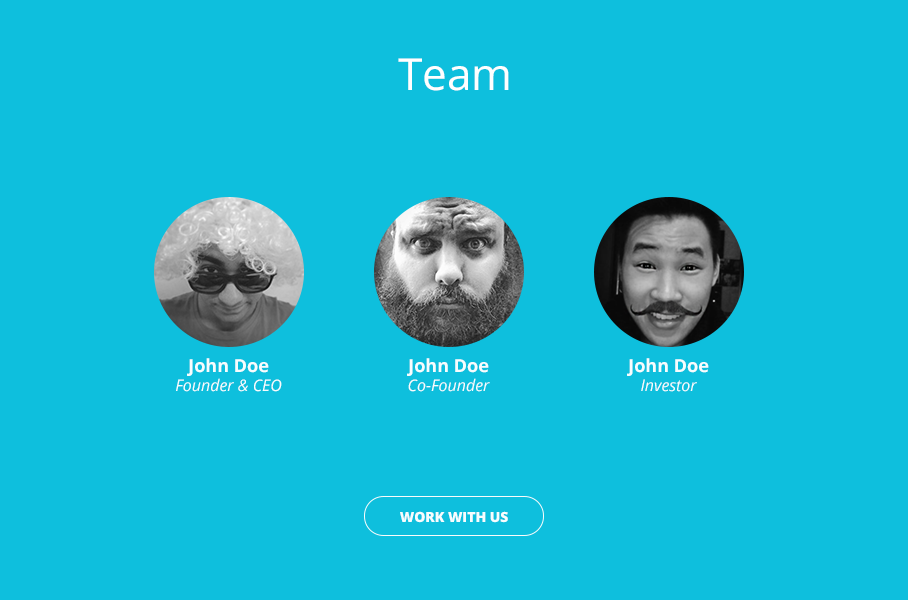
<style>
.page{position:relative;width:908px;height:600px;background:#0ebfdd}
.page>*{position:absolute;margin:0}
.t1{font:44px "OpenSans";color:#ffffff}
.t2{font:16px "OpenSans-Italic";color:#f7fdfe}
.t3{font:18px "OpenSans-Bold";color:#f7fdfe}
.t4{font:14px "OpenSans-Extrabold";color:#f7fdfe;text-transform:uppercase}
</style>
<div class="page">
<p class="t1" style="left:398px;top:58px;width:111px;height:33px">Team</p>
<p class="t2" style="left:176px;top:358px;width:106px;height:34px;text-align:center"><span class="t3">John Doe<br></span>Founder &amp; CEO</p>
<p class="t2" style="left:407px;top:358px;width:83px;height:34px;text-align:center"><span class="t3">John Doe<br></span>Co-Founder</p>
<p class="t3" style="left:627px;top:358px;width:82px;height:34px;text-align:center">John Doe<br><span class="t2">Investor</span></p>
<p class="t4" style="left:400px;top:511px;width:108px;height:12px">work with us</p>
</div>
